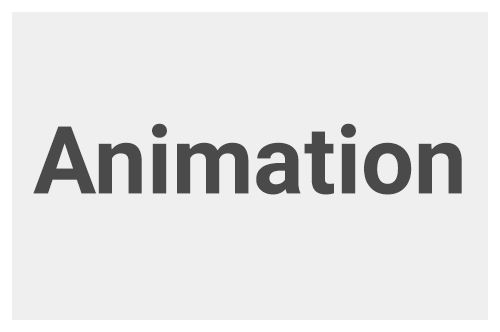
<style>
.page{position:relative;width:500px;height:332px;background:#efefef}
.page>*{position:absolute;margin:0}
.t1{font:94.2px "Roboto-Bold";color:#4a4a4a}
</style>
<div class="page">
<p class="t1" style="left:33px;top:126px;width:64px;height:68px">A</p>
<p class="t1" style="left:152px;top:123px;width:15px;height:71px">i</p>
<p class="t1" style="left:341px;top:123px;width:15px;height:71px">i</p>
<p class="t1" style="left:304px;top:131px;width:30px;height:64px">t</p>
<p class="t1" style="left:98px;top:142px;width:44px;height:52px">n</p>
<p class="t1" style="left:177px;top:142px;width:72px;height:52px">m</p>
<p class="t1" style="left:256px;top:142px;width:45px;height:53px">a</p>
<p class="t1" style="left:364px;top:142px;width:48px;height:53px">o</p>
<p class="t1" style="left:418px;top:142px;width:44px;height:52px">n</p>
</div>
